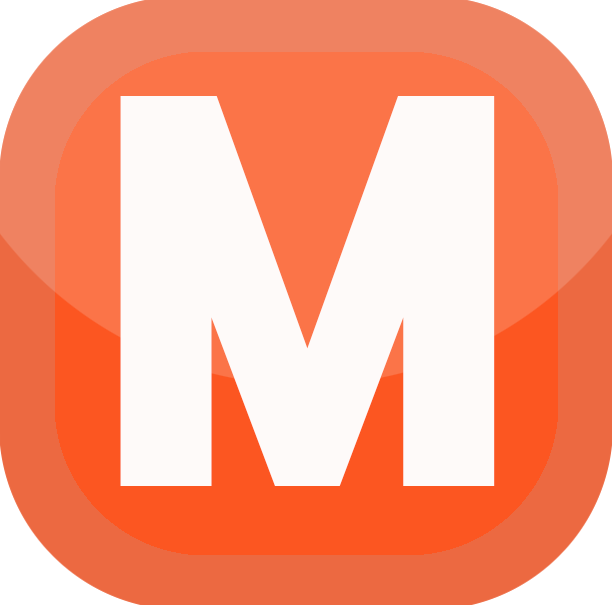
<style>
.page{position:relative;width:612px;height:605px;background:#fefaf9}
.page>*{position:absolute;margin:0}
.t1{font:445.8px "HeadlineR-HM";color:#fefaf9}
</style>
<div class="page">
<p class="t1" style="left:120px;top:96px;width:375px;height:390px">M</p>
</div>
